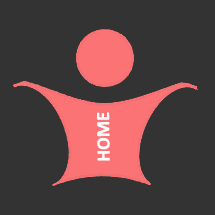
<style>
.page{position:relative;width:215px;height:215px;background:#333333}
.page>*{position:absolute;margin:0}
.t1{font:18.7px "Calibri-Bold";color:#ffffff}
</style>
<div class="page">
<p class="t1" style="left:97px;top:112px;width:13px;height:49px;rotate:-91deg">HOME</p>
</div>
